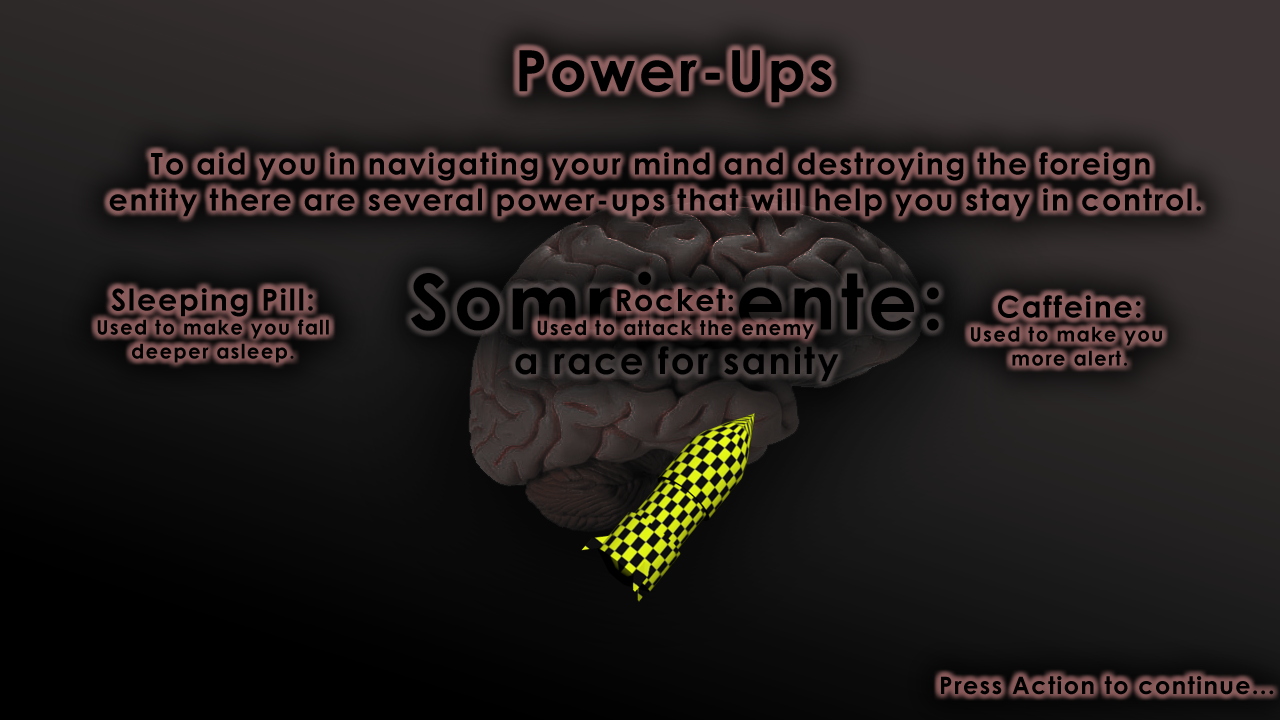
<style>
.page{position:relative;width:1280px;height:720px}
.page>*{position:absolute;margin:0}
.t1{font:57px "CenturyGothic-Bold";letter-spacing:0.06em;color:#000000}
.t2{font:30px "CenturyGothic-Bold";letter-spacing:0.06em;color:#000000}
.t3{font:37px "CenturyGothic-Bold";letter-spacing:0.06em;color:#000000}
.t4{font:77px "CenturyGothic-Bold";letter-spacing:0.06em;color:#000000}
.t5{font:20px "CenturyGothic-Bold";letter-spacing:0.06em;color:#000000}
.t6{font:24px "CenturyGothic-Bold";letter-spacing:0.06em;color:#000000}
</style>
<div class="page">
<p class="t1" style="left:519px;top:50px;width:313px;height:53px">Power-Ups</p>
<p class="t2" style="left:109px;top:152px;width:1092px;height:65px;text-align:center">To aid you in navigating your mind and destroying the foreign <br>entity there are several power-ups that will help you stay in control.</p>
<p class="t3" style="left:411px;top:271px;width:528px;height:111px;text-align:center"><span class="t4">Somnimente:<br></span>a race for sanity</p>
<p class="t5" style="left:97px;top:288px;width:232px;height:75px;text-align:center"><span class="t2">Sleeping Pill:<br></span>Used to make you fall<br>deeper asleep.</p>
<p class="t5" style="left:537px;top:289px;width:277px;height:50px;text-align:center"><span class="t2">Rocket:<br></span>Used to attack the enemy</p>
<p class="t5" style="left:971px;top:295px;width:191px;height:71px;text-align:center"><span class="t2">Caffeine:<br></span>Used to make you <br>more alert.</p>
<p class="t6" style="left:941px;top:676px;width:333px;height:19px">Press Action to continue...</p>
</div>
